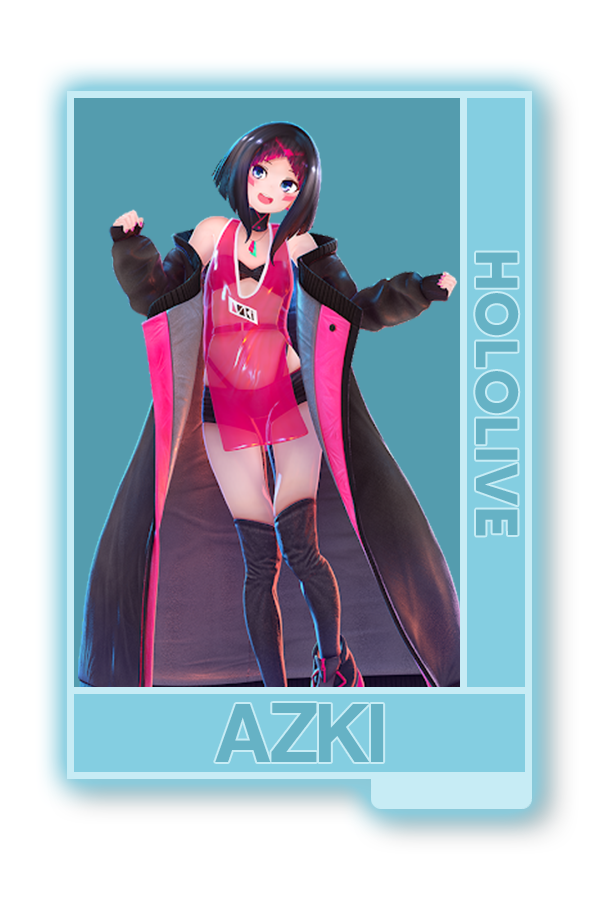
<style>
.page{position:relative;width:600px;height:900px;background:#ffffff}
.page>*{position:absolute;margin:0}
.t1{font:59.2px "MADETOMMY-Bold";color:#66b2c5}
.t2{font:86.6px "CoolveticaRg-Regular";color:#66b2c5}
</style>
<div class="page">
<p class="t1" style="left:475px;top:252px;width:44px;height:284px;rotate:90deg">HOLOLIVE</p>
<p class="t2" style="left:215px;top:703px;width:169px;height:59px">AZKI</p>
</div>
